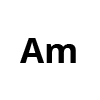
<style>
.page{position:relative;width:100px;height:100px;background:#ffffff}
.page>*{position:absolute;margin:0}
.t1{font:35px "OpenSans-Bold";color:#000000}
</style>
<div class="page">
<p class="t1" style="left:20px;top:38px;width:56px;height:25px">Am</p>
</div>
